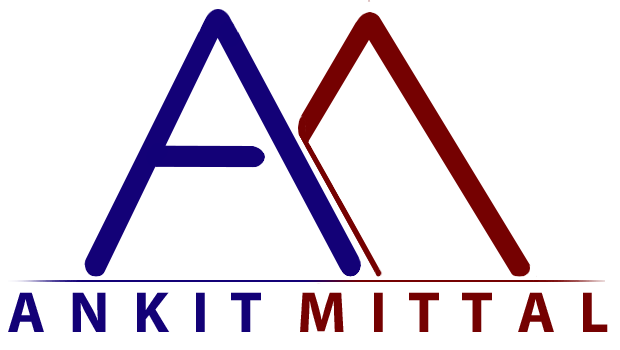
<style>
.page{position:relative;width:620px;height:350px;background:#ffffff}
.page>*{position:absolute;margin:0}
.t1{font:58.3px "MyriadPro-Bold";color:#750101}
.t2{font:58.3px "MyriadPro-Bold";color:#130177}
</style>
<div class="page">
<p class="t1" style="left:8px;top:292px;width:600px;height:40px"><span class="t2">A  N  K  I  T   </span>M  I  T  T  A  L</p>
</div>
